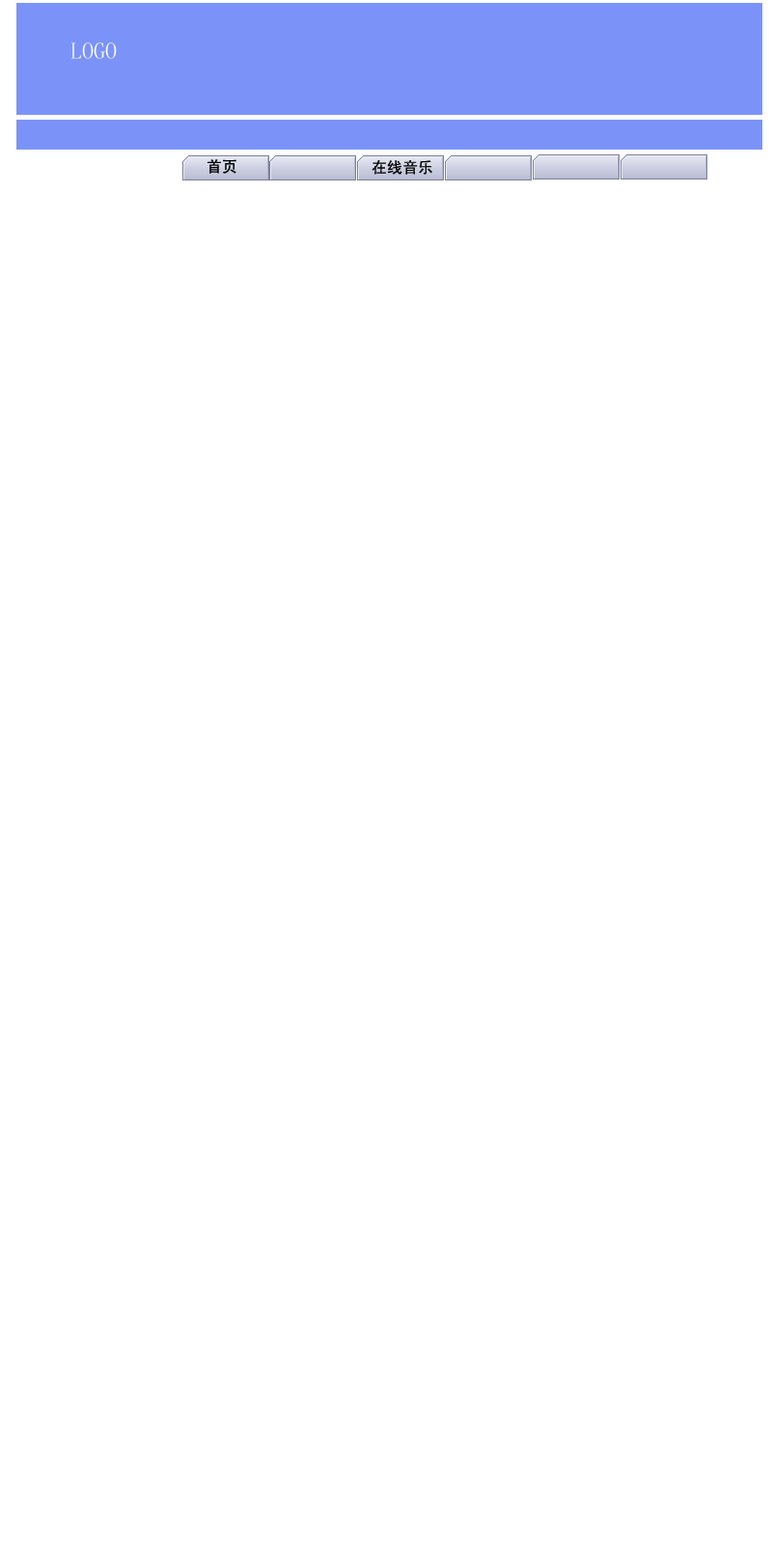
<style>
.page{position:relative;width:772px;height:1544px;background:#ffffff}
.page>*{position:absolute;margin:0}
.t1{font:23.2px "SimSun";color:#ffffff}
.t2{font:15.4px "SimHei";color:#000000}
</style>
<div class="page">
<p class="t1" style="left:71px;top:42px;width:46px;height:17px">LOGO</p>
<p class="t2" style="left:208px;top:159px;width:28px;height:15px">首页</p>
<p class="t2" style="left:372px;top:160px;width:60px;height:15px">在线音乐</p>
</div>
